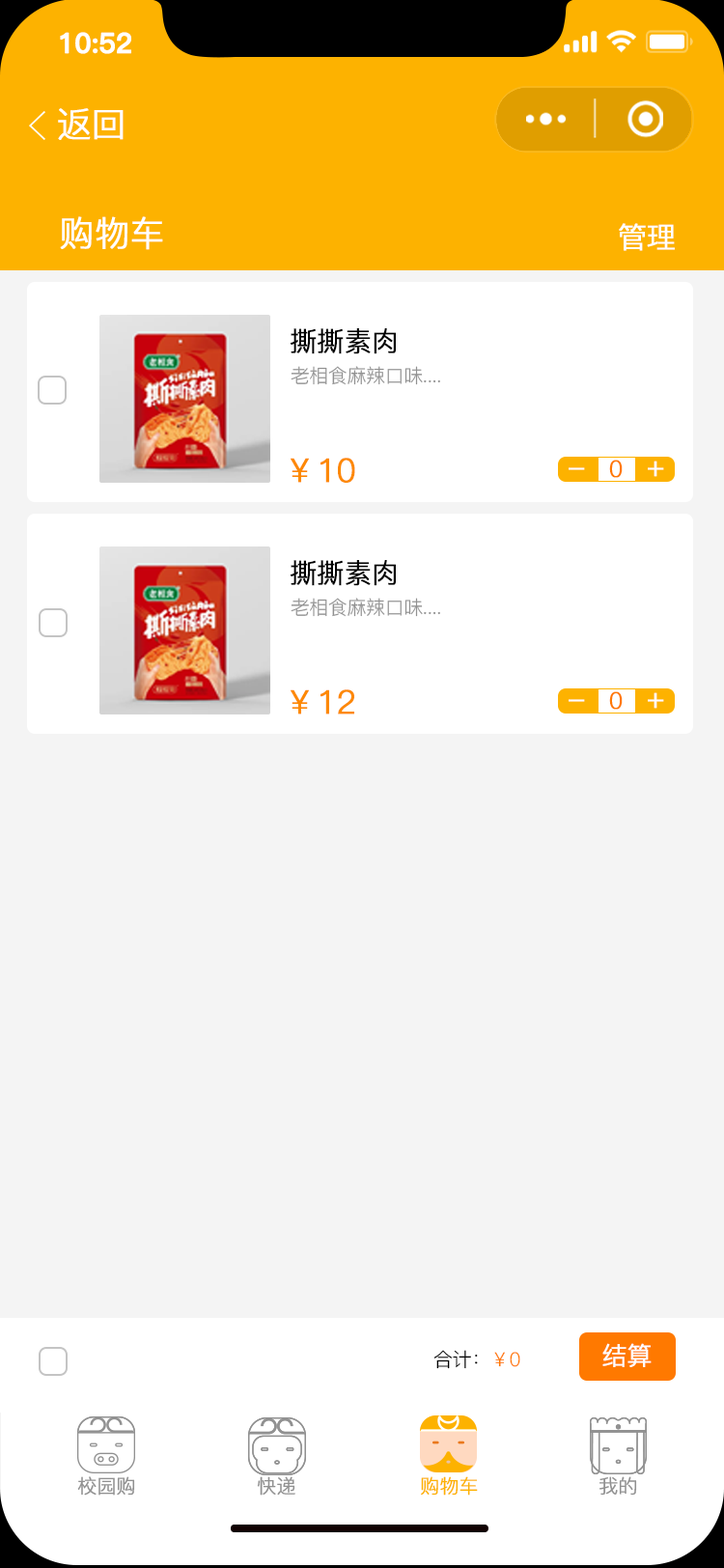
<style>
.page{position:relative;width:724px;height:1568px;background:#f4f4f4}
.page>*{position:absolute;margin:0}
.t1{font:27.5px "PingFang-SC-Bold";letter-spacing:-0.02em;color:#ffffff;font-weight:bold}
.t2{font:34.8px "PingFang-SC-Regular";letter-spacing:-0.02em;color:#ffffff;font-weight:bold}
.t3{font:29px "PingFang-SC-Regular";letter-spacing:-0.02em;color:#ffffff;font-weight:bold}
.t4{font:27px "PingFang-SC-Regular";letter-spacing:-0.02em;color:#000000;font-weight:bold}
.t5{font:19.3px "PingFang-SC-Regular";letter-spacing:-0.02em;color:#919191}
.t6{font:32.8px "PingFang-SC-Regular";letter-spacing:-0.02em;color:#fd8900;font-weight:bold}
.t7{font:23.2px "PingFang-SC-Regular";letter-spacing:-0.02em;color:#ff7900;font-weight:bold}
.t8{font:19.3px "PingFang-SC-Regular";letter-spacing:-0.02em;color:#000000}
.t9{font:19.3px "PingFang-SC-Regular";letter-spacing:-0.02em;color:#ff7900}
.t10{font:25.1px "PingFang-SC-Regular";letter-spacing:-0.02em;color:#ffffff;font-weight:bold}
.t11{font:19.3px "PingFang-SC-Regular";letter-spacing:-0.02em;color:#919191;font-weight:bold}
.t12{font:19.3px "PingFang-SC-Regular";letter-spacing:-0.02em;color:#fdb200;font-weight:bold}
</style>
<div class="page">
<p class="t1" style="left:60px;top:32px;width:71px;height:22px">10:52</p>
<p class="t2" style="left:58px;top:108px;width:66px;height:32px">返回</p>
<p class="t2" style="left:60px;top:216px;width:103px;height:34px">购物车</p>
<p class="t3" style="left:619px;top:223px;width:56px;height:28px">管理</p>
<p class="t4" style="left:291px;top:328px;width:105px;height:26px">撕撕素肉</p>
<p class="t5" style="left:291px;top:366px;width:149px;height:19px">老相食麻辣口味....</p>
<p class="t6" style="left:291px;top:458px;width:64px;height:25px">￥10</p>
<p class="t7" style="left:609px;top:460px;width:14px;height:18px">0</p>
<p class="t3" style="left:648px;top:461px;width:16px;height:16px">+</p>
<p class="t3" style="left:569px;top:467px;width:16px;height:3px">-</p>
<p class="t4" style="left:291px;top:560px;width:105px;height:26px">撕撕素肉</p>
<p class="t5" style="left:291px;top:598px;width:149px;height:19px">老相食麻辣口味....</p>
<p class="t6" style="left:291px;top:689px;width:63px;height:25px">￥12</p>
<p class="t3" style="left:569px;top:699px;width:16px;height:3px">-</p>
<p class="t7" style="left:609px;top:691px;width:14px;height:19px">0</p>
<p class="t3" style="left:648px;top:692px;width:16px;height:17px">+</p>
<p class="t8" style="left:434px;top:1350px;width:86px;height:19px">合计：<span class="t9">￥0</span></p>
<p class="t10" style="left:602px;top:1343px;width:50px;height:24px">结算</p>
<p class="t11" style="left:77px;top:1476px;width:58px;height:20px">校园购</p>
<p class="t11" style="left:257px;top:1476px;width:38px;height:20px">快递</p>
<p class="t12" style="left:421px;top:1476px;width:57px;height:20px">购物车</p>
<p class="t11" style="left:600px;top:1476px;width:37px;height:20px">我的</p>
</div>
